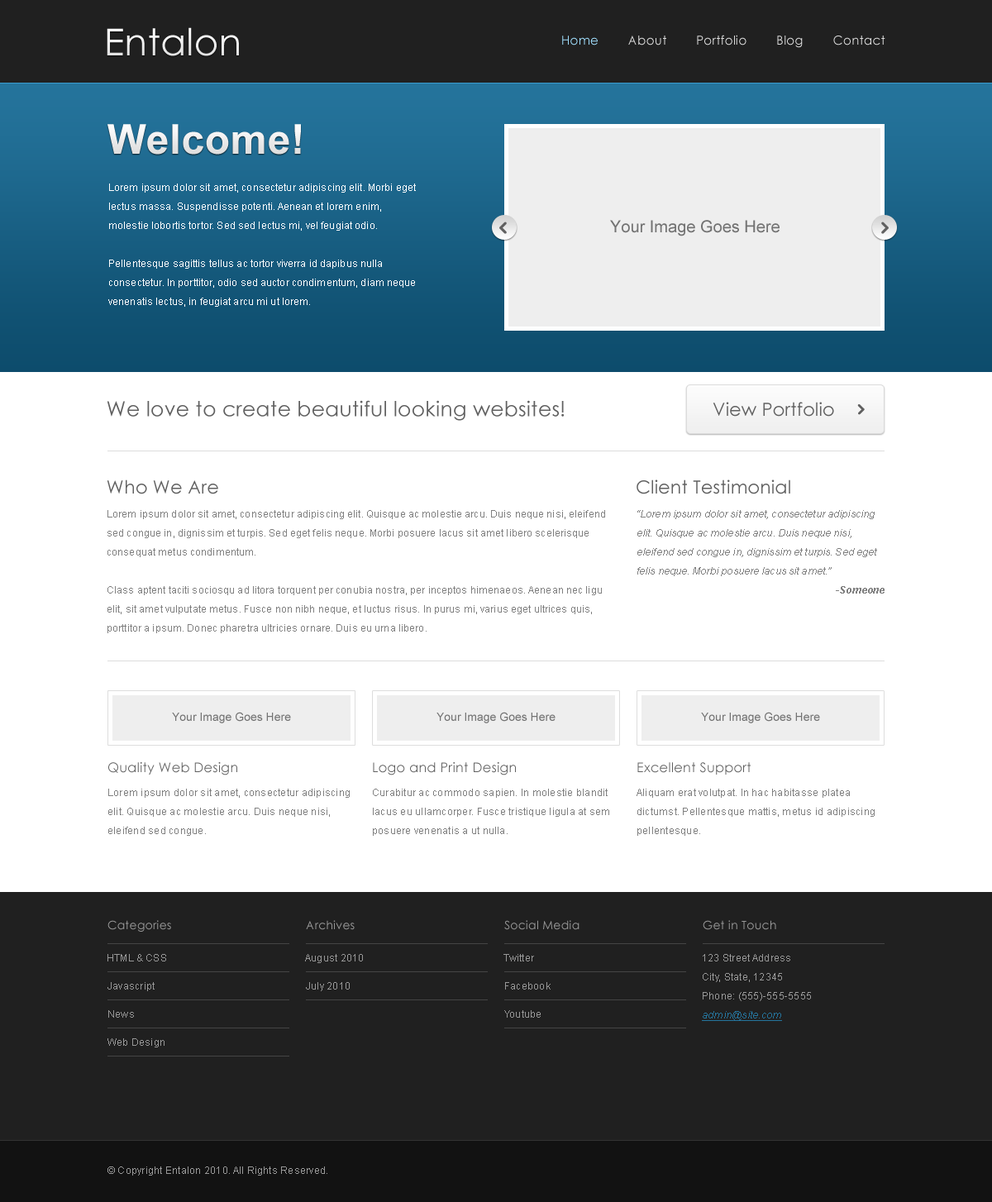
<style>
.page{position:relative;width:992px;height:1202px;background:#ffffff}
.page>*{position:absolute;margin:0}
.t1{font:37.2px "CenturyGothic";letter-spacing:0.01em;color:#ffffff}
.t2{font:12.4px "CenturyGothic";letter-spacing:0.02em;color:#dddddd}
.t3{font:12.4px "CenturyGothic";letter-spacing:0.02em;color:#a1e0ff}
.t4{font:41.3px "Arial-BoldMT";letter-spacing:0.01em;color:#ffffff}
.t5{font:9.9px/19px "ArialMT";letter-spacing:0.01em;color:#ffffff}
.t6{font:16.5px "ArialMT";color:#737373}
.t7{font:20.7px "CenturyGothic";letter-spacing:0.01em;color:#606060}
.t8{font:18.2px "CenturyGothic";letter-spacing:0.01em;color:#606060}
.t9{font:9.9px/19px "ArialMT";letter-spacing:0.01em;color:#808080}
.t10{font:9.9px/19px "Arial-ItalicMT";letter-spacing:0.01em;color:#808080}
.t11{font:9.9px/19px "Arial-BoldItalicMT";letter-spacing:0.01em;color:#808080}
.t12{font:11.6px "ArialMT";color:#737373}
.t13{font:13.2px "CenturyGothic";letter-spacing:0.02em;color:#606060}
.t14{font:9.9px/19px "ArialMT";letter-spacing:0.02em;color:#808080}
.t15{font:11.6px "CenturyGothic";letter-spacing:0.02em;color:#989898}
.t16{font:9.9px "ArialMT";letter-spacing:0.02em;color:#989898}
.t17{font:9.9px/19px "ArialMT";letter-spacing:0.02em;color:#989898}
.t18{font:9.9px/19px "Arial-ItalicMT";letter-spacing:0.02em;color:#25749c;text-decoration:underline}
</style>
<div class="page">
<p class="t1" style="left:107px;top:27px;width:132px;height:29px">Entalon</p>
<p class="t2" style="left:562px;top:35px;width:323px;height:13px"><span class="t3">Home</span>        About        Portfolio        Blog        Contact</p>
<p class="t4" style="left:107px;top:124px;width:194px;height:31px">Welcome!</p>
<p class="t5" style="left:108px;top:184px;width:308px;height:123px">Lorem ipsum dolor sit amet, consectetur adipiscing elit. Morbi eget lectus massa. Suspendisse potenti. Aenean et lorem enim, molestie lobortis tortor. Sed sed lectus mi, vel feugiat odio.<br><br>Pellentesque sagittis tellus ac tortor viverra id dapibus nulla consectetur. In porttitor, odio sed auctor condimentum, diam neque venenatis lectus, in feugiat arcu mi ut lorem.</p>
<p class="t6" style="left:610px;top:220px;width:170px;height:16px">Your Image Goes Here</p>
<p class="t7" style="left:107px;top:400px;width:457px;height:21px">We love to create beautiful looking websites!</p>
<p class="t8" style="left:713px;top:402px;width:121px;height:15px">View Portfolio</p>
<p class="t8" style="left:107px;top:479px;width:111px;height:15px">Who We Are</p>
<p class="t8" style="left:637px;top:479px;width:153px;height:15px">Client Testimonial</p>
<p class="t9" style="left:107px;top:510px;width:498px;height:123px">Lorem ipsum dolor sit amet, consectetur adipiscing elit. Quisque ac molestie arcu. Duis neque nisi, eleifend sed congue in, dignissim et turpis. Sed eget felis neque. Morbi posuere lacus sit amet libero scelerisque consequat metus condimentum. <br><br>Class aptent taciti sociosqu ad litora torquent per conubia nostra, per inceptos himenaeos. Aenean nec ligu elit, sit amet vulputate metus. Fusce non nibh neque, et luctus risus. In purus mi, varius eget ultrices quis, porttitor a ipsum. Donec pharetra ultricies ornare. Duis eu urna libero.</p>
<p class="t10" style="left:637px;top:510px;width:248px;height:84px">“Lorem ipsum dolor sit amet, consectetur adipiscing elit. Quisque ac molestie arcu. Duis neque nisi, eleifend sed congue in, dignissim et turpis. Sed eget felis neque. Morbi posuere lacus sit amet.”<br>-<span class="t11">Someone</span></p>
<p class="t12" style="left:172px;top:712px;width:119px;height:11px">Your Image Goes Here</p>
<p class="t12" style="left:436px;top:712px;width:120px;height:11px">Your Image Goes Here</p>
<p class="t12" style="left:701px;top:712px;width:119px;height:11px">Your Image Goes Here</p>
<p class="t13" style="left:108px;top:762px;width:129px;height:13px">Quality Web Design</p>
<p class="t13" style="left:373px;top:762px;width:143px;height:13px">Logo and Print Design</p>
<p class="t13" style="left:637px;top:762px;width:114px;height:13px">Excellent Support</p>
<p class="t14" style="left:108px;top:789px;width:242px;height:47px">Lorem ipsum dolor sit amet, consectetur adipiscing elit. Quisque ac molestie arcu. Duis neque nisi, eleifend sed congue.</p>
<p class="t14" style="left:373px;top:789px;width:236px;height:47px">Curabitur ac commodo sapien. In molestie blandit lacus eu ullamcorper. Fusce tristique ligula at sem posuere venenatis a ut nulla.</p>
<p class="t14" style="left:637px;top:789px;width:238px;height:47px">Aliquam erat volutpat. In hac habitasse platea dictumst. Pellentesque mattis, metus id adipiscing pellentesque.</p>
<p class="t15" style="left:107px;top:920px;width:64px;height:12px">Categories</p>
<p class="t15" style="left:306px;top:920px;width:49px;height:10px">Archives</p>
<p class="t15" style="left:504px;top:920px;width:76px;height:10px">Social Media</p>
<p class="t15" style="left:703px;top:920px;width:73px;height:10px">Get in Touch</p>
<p class="t16" style="left:107px;top:954px;width:59px;height:7px">HTML &amp; CSS</p>
<p class="t16" style="left:305px;top:954px;width:58px;height:9px">August 2010</p>
<p class="t16" style="left:503px;top:954px;width:31px;height:7px">Twitter</p>
<p class="t17" style="left:702px;top:954px;width:109px;height:67px">123 Street Address<br>City, State, 12345<br>Phone: (555)-555-5555<br><span class="t18">admin@site.com</span></p>
<p class="t16" style="left:107px;top:982px;width:48px;height:9px">Javascript</p>
<p class="t16" style="left:306px;top:982px;width:44px;height:9px">July 2010</p>
<p class="t16" style="left:505px;top:982px;width:46px;height:8px">Facebook</p>
<p class="t16" style="left:108px;top:1010px;width:26px;height:8px">News</p>
<p class="t16" style="left:504px;top:1010px;width:37px;height:8px">Youtube</p>
<p class="t16" style="left:107px;top:1038px;width:58px;height:9px">Web Design</p>
<p class="t16" style="left:107px;top:1166px;width:220px;height:10px">© Copyright Entalon 2010. All Rights Reserved.</p>
</div>
